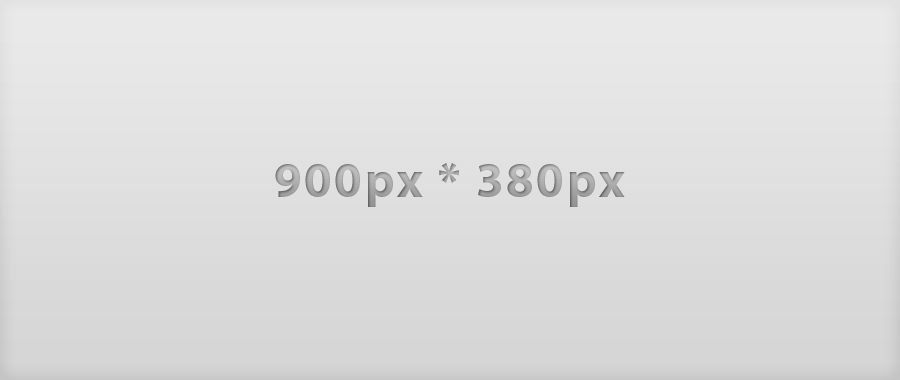
<style>
.page{position:relative;width:900px;height:380px}
.page>*{position:absolute;margin:0}
.t1{font:50px "MyriadPro-Bold";letter-spacing:0.05em;color:#a3a3a3}
</style>
<div class="page">
<p class="t1" style="left:275px;top:163px;width:350px;height:44px">900px * 380px</p>
</div>
